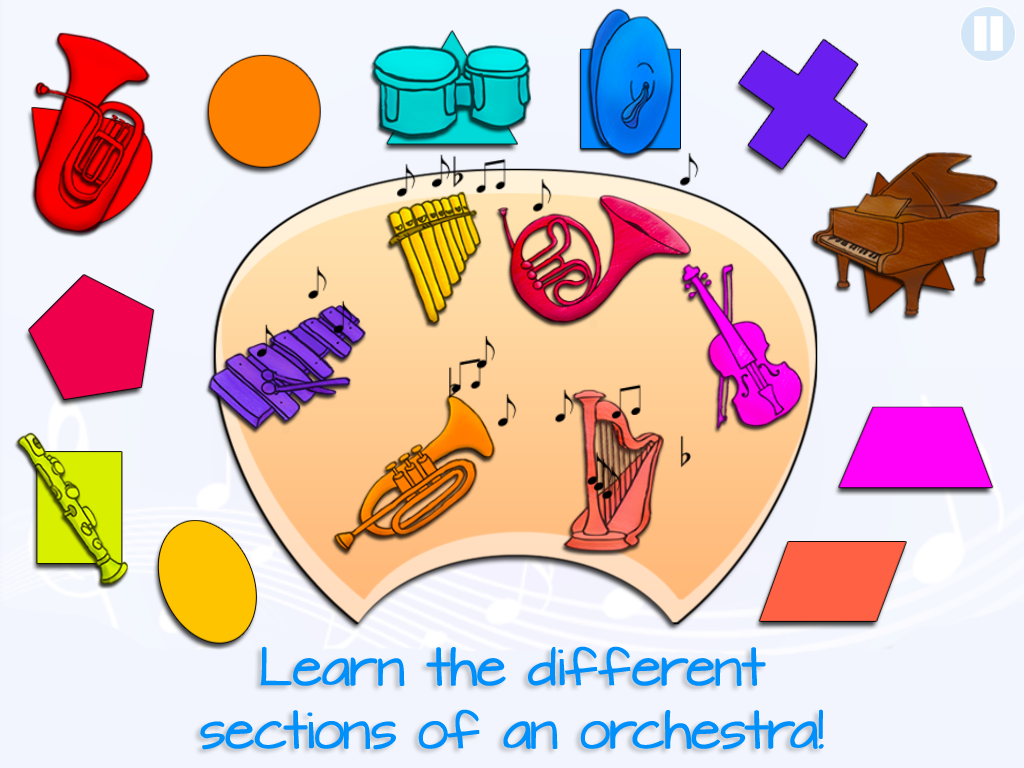
<style>
.page{position:relative;width:1024px;height:768px}
.page>*{position:absolute;margin:0}
.t1{font:46px/63px "ArchitectsDaughter";letter-spacing:-0.018em;color:#0090fb}
</style>
<div class="page">
<p class="t1" style="left:200px;top:646px;width:624px;height:104px;text-align:center">Learn the different<br>sections of an orchestra!</p>
</div>
